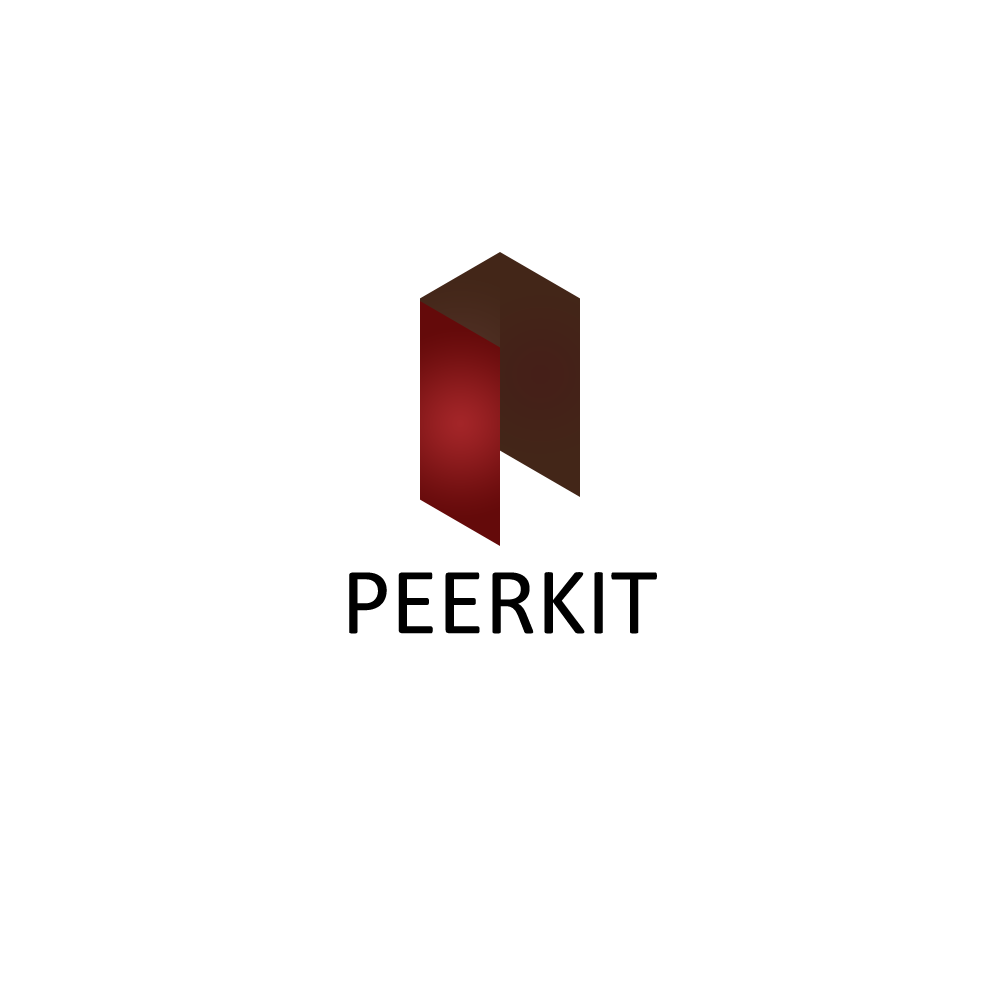
<style>
.page{position:relative;width:1000px;height:1000px;background:#ffffff}
.page>*{position:absolute;margin:0}
.t1{font:96px "Calibri";color:#000000}
</style>
<div class="page">
<p class="t1" style="left:349px;top:572px;width:308px;height:62px">PEERKIT</p>
</div>
